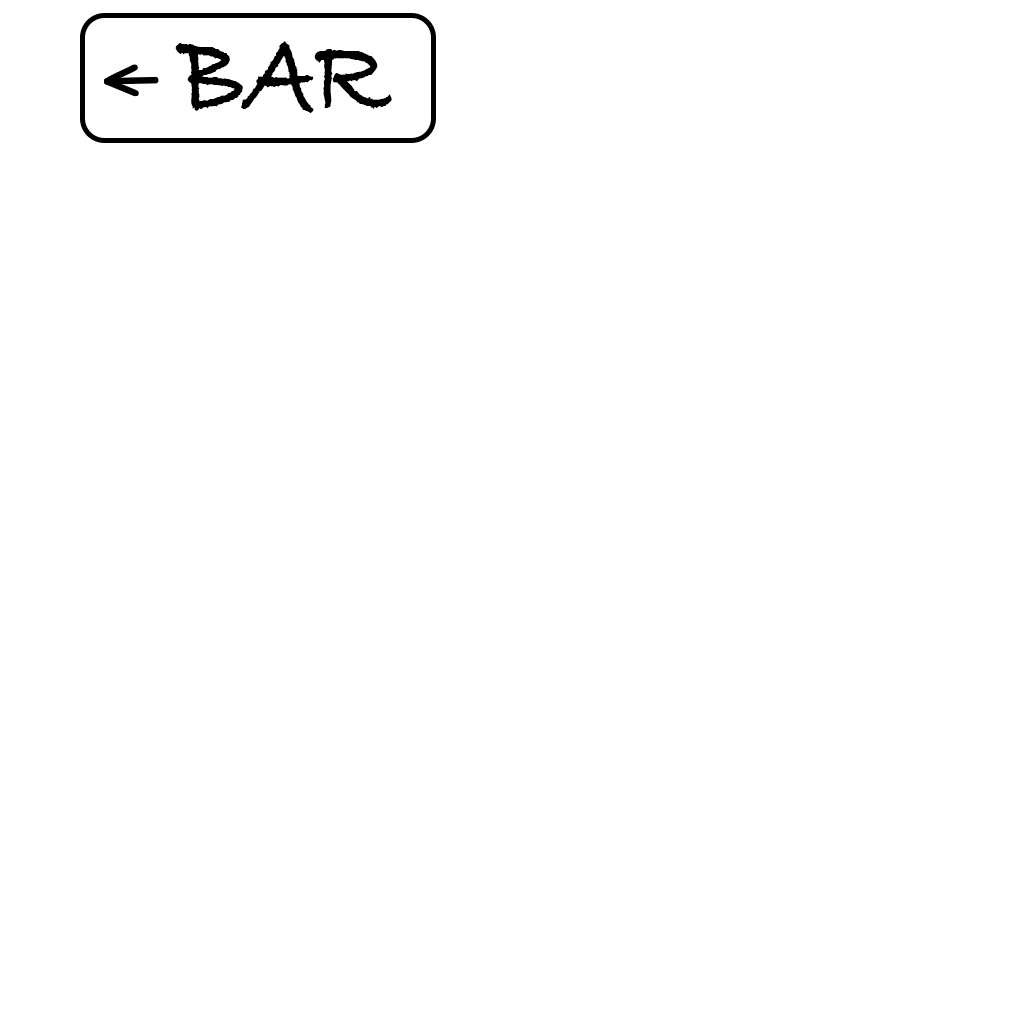
<style>
.page{position:relative;width:1024px;height:1024px;background:#ffffff}
.page>*{position:absolute;margin:0}
.t1{font:117.4px "BradleyHandITCTT-Bold";color:#000000;scale:0.82 1}
</style>
<div class="page">
<p class="t1" style="left:175px;top:41px;width:217px;height:72px">BAR</p>
</div>
